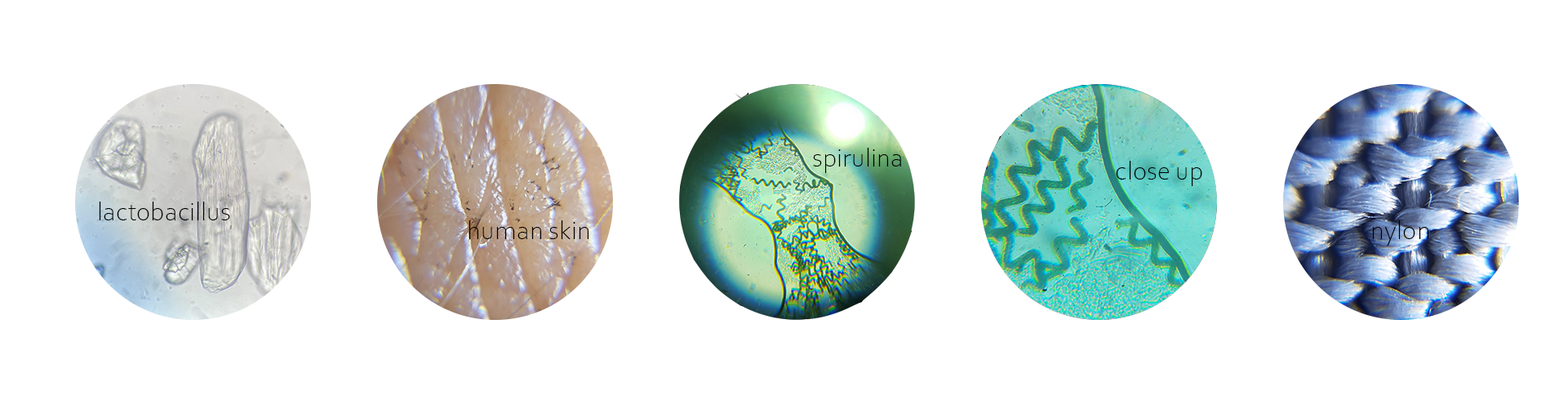
<style>
.page{position:relative;width:1568px;height:404px;background:#ffffff}
.page>*{position:absolute;margin:0}
.t1{font:27.2px "CorbelLight";color:#000000}
</style>
<div class="page">
<p class="t1" style="left:813px;top:148px;width:88px;height:25px">spirulina</p>
<p class="t1" style="left:1116px;top:161px;width:86px;height:25px">close up</p>
<p class="t1" style="left:99px;top:202px;width:131px;height:18px">lactobacillus</p>
<p class="t1" style="left:469px;top:220px;width:120px;height:19px">human skin</p>
<p class="t1" style="left:1372px;top:220px;width:57px;height:26px">nylon</p>
</div>
